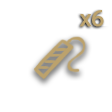
<style>
.page{position:relative;width:112px;height:112px;background:#ffffff}
.page>*{position:absolute;margin:0}
.t1{font:23.5px "MyriadPro-Regular";color:#bca26c;font-weight:bold}
</style>
<div class="page">
<p class="t1" style="left:80px;top:10px;width:24px;height:17px">x6</p>
</div>
